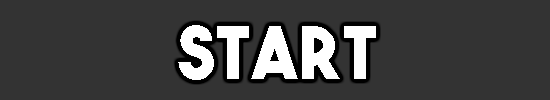
<style>
.page{position:relative;width:550px;height:100px;background:#333333}
.page>*{position:absolute;margin:0}
.t1{font:72px "TheBoldFont";color:#ffffff}
</style>
<div class="page">
<p class="t1" style="left:178px;top:25px;width:198px;height:55px">START</p>
</div>
